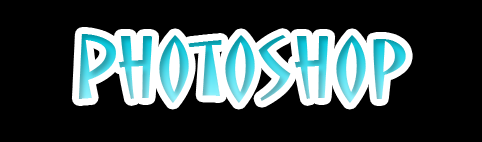
<style>
.page{position:relative;width:482px;height:142px;background:#000000}
.page>*{position:absolute;margin:0}
.t1{font:72px "MatisseITC-Regular";scale:1.26 1}
</style>
<div class="page">
<p class="t1" style="left:78px;top:34px;width:328px;height:69px">Photoshop</p>
</div>
